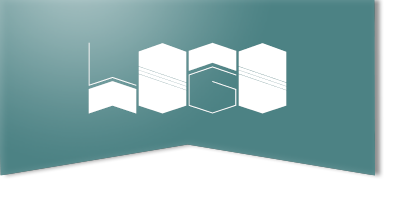
<style>
.page{position:relative;width:400px;height:200px;background:#ffffff}
.page>*{position:absolute;margin:0}
.t1{font:100px "Sanity";color:#ffffff}
</style>
<div class="page">
<p class="t1" style="left:88px;top:42px;width:199px;height:72px">LOGO</p>
</div>
